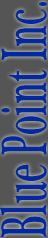
<style>
.page{position:relative;width:48px;height:238px;background:#555555}
.page>*{position:absolute;margin:0}
.t1{font:66px "Plantagenet-bold";color:#04299f;scale:0.5 1}
</style>
<div class="page">
<p class="t1" style="left:0px;top:2px;width:47px;height:235px;rotate:-90deg">Blue Point Inc.</p>
</div>
